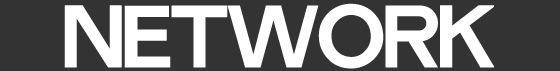
<style>
.page{position:relative;width:560px;height:71px;background:#333333}
.page>*{position:absolute;margin:0}
.t1{font:100px "Pentatonic";letter-spacing:-0.075em;color:#ffffff;font-weight:bold}
</style>
<div class="page">
<p class="t1" style="left:64px;top:3px;width:430px;height:66px">NETWORK</p>
</div>
